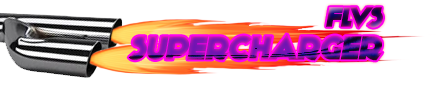
<style>
.page{position:relative;width:446px;height:88px;background:#ffffff}
.page>*{position:absolute;margin:0}
.t1{font:28.3px "KiloGram";font-style:italic}
.t2{font:33.8px "KiloGram";font-style:italic}
</style>
<div class="page">
<p class="t1" style="left:326px;top:7px;width:57px;height:21px">FLVS</p>
<p class="t2" style="left:128px;top:34px;width:255px;height:27px">SUPERCHARGER</p>
</div>
